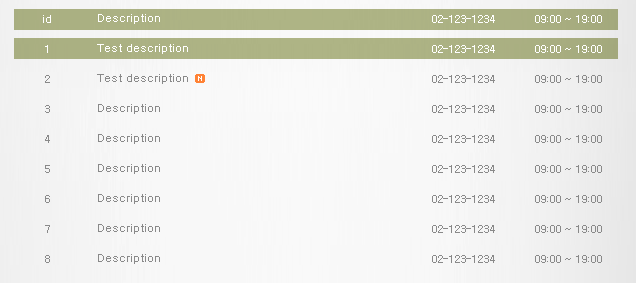
<style>
.page{position:relative;width:636px;height:283px;background:#f8f8f8}
.page>*{position:absolute;margin:0}
.t1{font:11px/30px "Gulim";color:#898989}
.t2{font:11px/30px "Gulim";color:#ffffff}
</style>
<div class="page">
<p class="t1" style="left:43px;top:15px;width:8px;height:248px;text-align:center"><span class="t2">id<br>1<br></span>2<br>3<br>4<br>5<br>6<br>7<br>8<br>잠실점</p>
<p class="t1" style="left:97px;top:14px;width:91px;height:250px"><span class="t2">Description <br>Test description <br></span>Test description <br>Description<br>Description<br>Description <br>Description<br>Description<br>Description <br>서울시 가나구 다라동 123번지 아사빌딩</p>
<p class="t1" style="left:432px;top:15px;width:63px;height:248px;text-align:center"><span class="t2">02-123-1234 <br>02-123-1234 <br></span>02-123-1234 <br>02-123-1234 <br>02-123-1234 <br>02-123-1234 <br>02-123-1234 <br>02-123-1234 <br>02-123-1234 <br>02-123-1234</p>
<p class="t1" style="left:535px;top:15px;width:67px;height:248px;text-align:center"><span class="t2">09:00 ~ 19:00<br>09:00 ~ 19:00<br></span>09:00 ~ 19:00<br>09:00 ~ 19:00<br>09:00 ~ 19:00<br>09:00 ~ 19:00<br>09:00 ~ 19:00<br>09:00 ~ 19:00<br>09:00 ~ 19:00<br>09:00 ~ 19:00</p>
</div>
